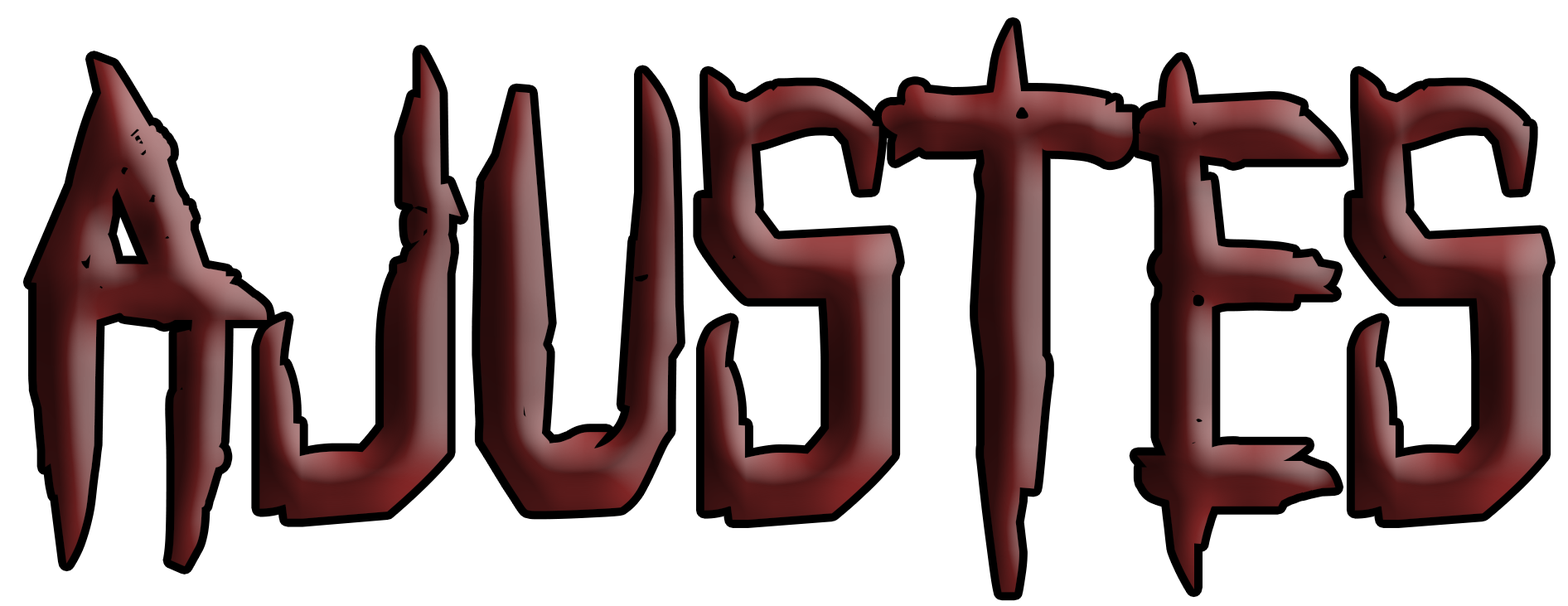
<style>
.page{position:relative;width:1568px;height:606px;background:#ffffff}
.page>*{position:absolute;margin:0}
.t1{font:587.4px "HorroroidBold"}
</style>
<div class="page">
<p class="t1" style="left:31px;top:25px;width:1516px;height:568px">AJUSTES</p>
</div>
